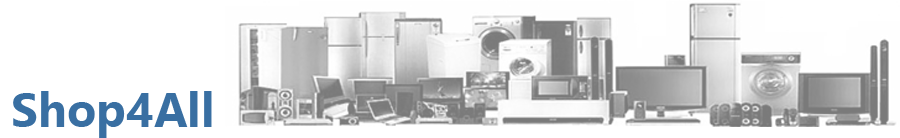
<style>
.page{position:relative;width:900px;height:138px;background:#ffffff}
.page>*{position:absolute;margin:0}
.t1{font:48px "SegoeUI-Bold";color:#396fa2}
</style>
<div class="page">
<p class="t1" style="left:13px;top:91px;width:199px;height:47px">Shop4All</p>
</div>
